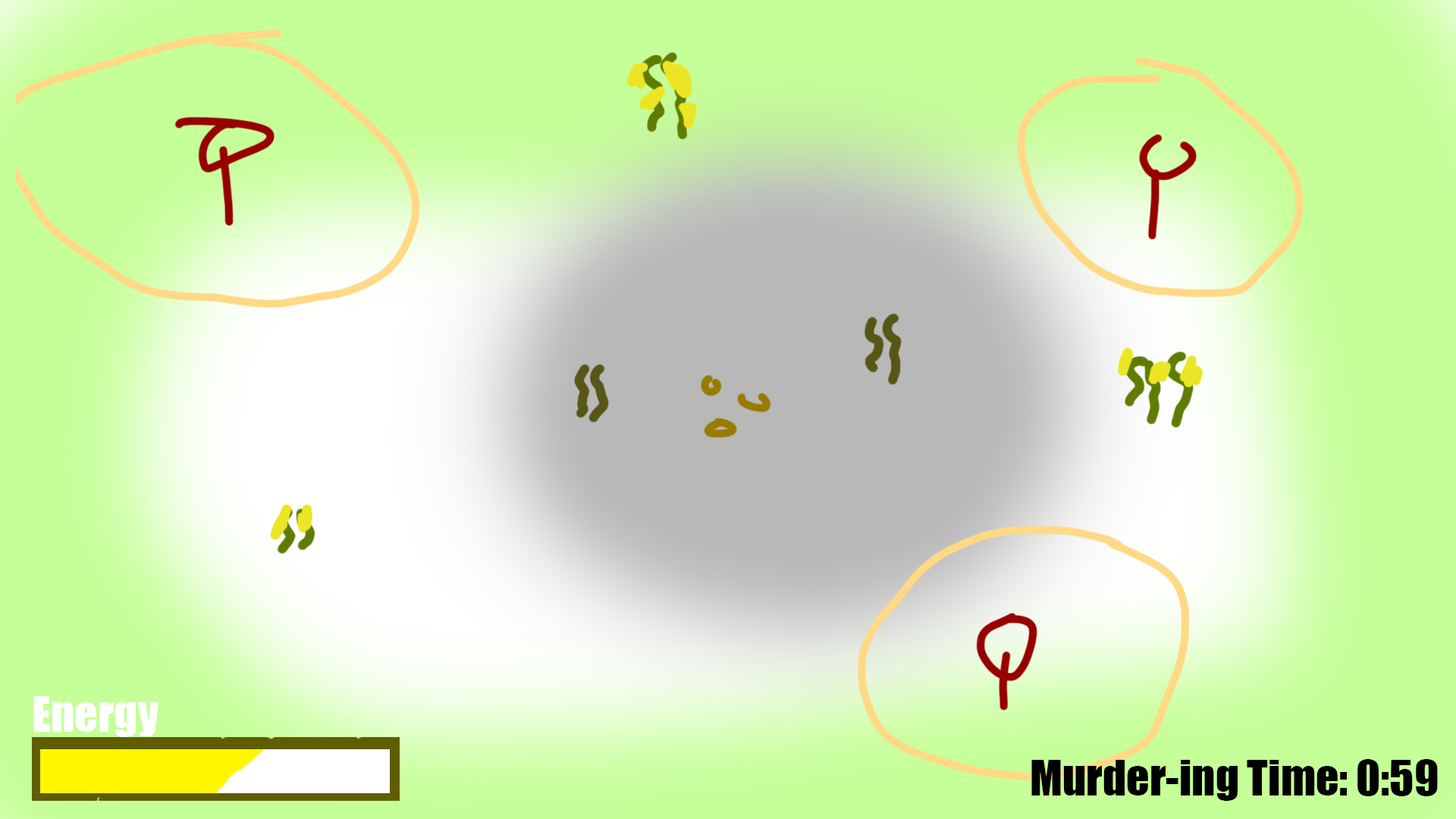
<style>
.page{position:relative;width:1456px;height:819px;background:#c5ff97}
.page>*{position:absolute;margin:0}
.t1{font:45.5px "Impact";color:#ffffff}
.t2{font:45.5px "Impact";color:#000000}
</style>
<div class="page">
<p class="t1" style="left:33px;top:696px;width:125px;height:41px">Energy</p>
<p class="t2" style="left:1031px;top:759px;width:407px;height:42px">Murder-ing Time: 0:59</p>
</div>
